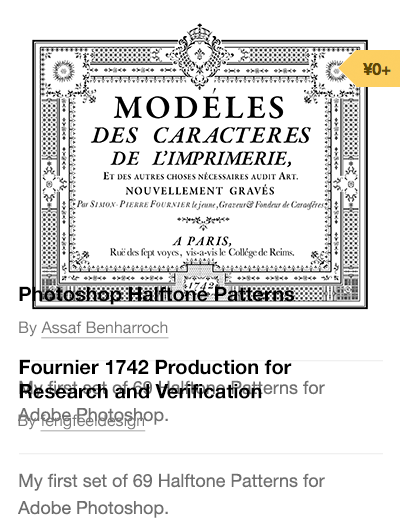
<style>
.page{position:relative;width:400px;height:531px;background:#ffffff}
.page>*{position:absolute;margin:0}
.t1{font:20.1px "HelveticaNeue-Bold";color:#000000}
.t2{font:16.1px "HelveticaNeue";color:#777777;text-decoration:underline}
.t3{font:16.1px "HelveticaNeue";color:#777777}
.t4{font:18.1px/27.1px "HelveticaNeue";color:#6f6f6f}
</style>
<div class="page">
<p class="t1" style="left:19px;top:286px;width:276px;height:19px">Photoshop Halftone Patterns</p>
<p class="t2" style="left:19px;top:321px;width:150px;height:18px"><span class="t3">By </span>Assaf Benharroch</p>
<p class="t1" style="left:19px;top:359px;width:273px;height:40px">Fournier 1742 Production for <br>Research and Verification</p>
<p class="t4" style="left:18px;top:380px;width:307px;height:45px">My first set of 69 Halftone Patterns for <br>Adobe Photoshop.</p>
<p class="t2" style="left:18px;top:414px;width:128px;height:18px"><span class="t3">By </span>fengfeeldesign</p>
<p class="t4" style="left:18px;top:473px;width:307px;height:45px">My first set of 69 Halftone Patterns for <br>Adobe Photoshop.</p>
</div>
